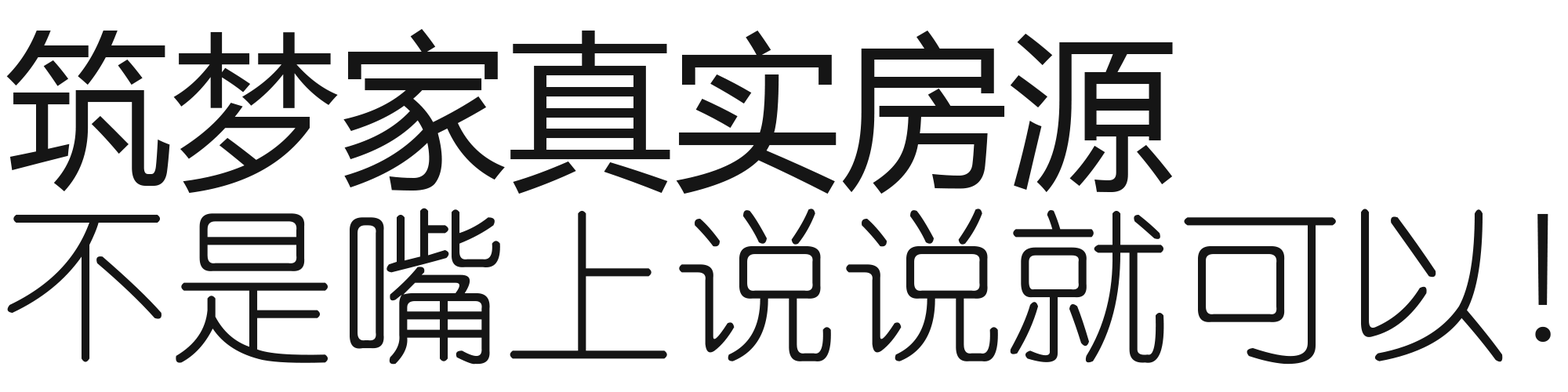
<style>
.page{position:relative;width:1568px;height:392px;background:#ffffff}
.page>*{position:absolute;margin:0}
.t1{font:167.3px "MicrosoftYaHei";color:#151515}
.t2{font:167.3px "YouYuan";color:#151515}
.t3{font:167.3px "DengXian";color:#151515}
</style>
<div class="page">
<p class="t1" style="left:6px;top:28px;width:1167px;height:166px">筑梦家真实房源</p>
<p class="t2" style="left:7px;top:208px;width:1544px;height:157px">不是嘴上说说就可以<span class="t3">！</span></p>
</div>
